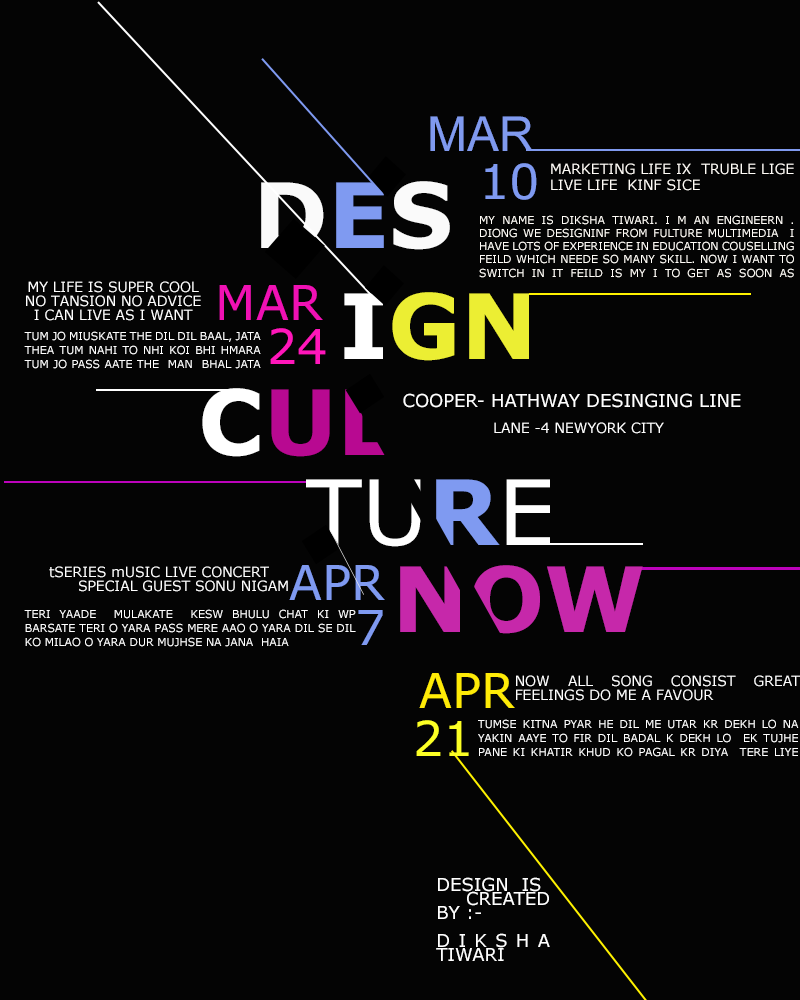
<style>
.page{position:relative;width:800px;height:1000px;background:#040404}
.page>*{position:absolute;margin:0}
.t1{font:48px "ArialMT";color:#809aef}
.t2{font:48px "Verdana";color:#7f9af1}
.t3{font:14px "Verdana";color:#fffcf7}
.t4{font:90px "Verdana-Bold";color:#fafafa}
.t5{font:90px "Verdana-Bold";color:#7f9af1}
.t6{font:11px "Verdana";color:#fffcf7}
.t7{font:14px/14px "Verdana";letter-spacing:-0.005em;color:#ffffff}
.t8{font:48px "Verdana";color:#f011b4}
.t9{font:90px "Verdana-Bold";color:#ecee33}
.t10{font:90px "Verdana-Bold";color:#ffffff}
.t11{font:48px "Verdana";color:#ff16ba}
.t12{font:11px/14px "Verdana";letter-spacing:-0.005em;color:#ffffff}
.t13{font:90px "Verdana-Bold";color:#b80991}
.t14{font:18px "Verdana";letter-spacing:-0.005em;color:#ffffff}
.t15{font:14px "Verdana";letter-spacing:-0.005em;color:#ffffff}
.t16{font:90px "Verdana";color:#ffffff}
.t17{font:90px "Verdana-Bold";color:#c628aa}
.t18{font:48px "Verdana";color:#ffeb07}
.t19{font:14px/14px "Verdana";color:#ffffff}
.t20{font:48px "Verdana";color:#fcff25}
.t21{font:11px/14px "Verdana";color:#ffffff}
.t22{font:18px/14px "Verdana";color:#ffffff}
</style>
<div class="page">
<p class="t1" style="left:430px;top:116px;width:103px;height:35px">MAR</p>
<p class="t2" style="left:485px;top:163px;width:52px;height:37px">10</p>
<p class="t3" style="left:551px;top:163px;width:243px;height:28px;text-align:justify">MARKETING LIFE IX  TRUBLE LIGE<br>LIVE LIFE  KINF SICE</p>
<p class="t4" style="left:261px;top:181px;width:189px;height:69px">D<span class="t5">E</span>S</p>
<p class="t6" style="left:479px;top:215px;width:315px;height:63px;text-align:justify">MY NAME IS DIKSHA TIWARI. I M AN ENGINEERN . DIONG WE DESIGNINF FROM FULTURE MULTIMEDIA  I HAVE LOTS OF EXPERIENCE IN EDUCATION COUSELLING FEILD WHICH NEEDE SO MANY SKILL. NOW I WANT TO SWITCH IN IT FEILD IS MY I TO GET AS SOON AS POSSIBLE</p>
<p class="t7" style="left:26px;top:281px;width:175px;height:40px;text-align:justify">MY LIFE IS SUPER COOL <br>NO TANSION NO ADVICE<br>I CAN LIVE AS I WANT</p>
<p class="t8" style="left:219px;top:285px;width:104px;height:35px">MAR</p>
<p class="t9" style="left:344px;top:292px;width:185px;height:69px"><span class="t10">I</span>GN</p>
<p class="t11" style="left:270px;top:328px;width:56px;height:36px">24</p>
<p class="t12" style="left:24px;top:331px;width:237px;height:38px;text-align:justify">TUM JO MIUSKATE THE DIL DIL BAAL, JATA THEA TUM NAHI TO NHI KOI BHI HMARA TUM JO PASS AATE THE  MAN  BHAL JATA THE TUM NAHI TO NAI KKOI</p>
<p class="t13" style="left:202px;top:388px;width:191px;height:69px"><span class="t10">C</span>UL</p>
<p class="t14" style="left:403px;top:393px;width:338px;height:15px">COOPER- HATHWAY DESINGING LINE</p>
<p class="t15" style="left:494px;top:422px;width:170px;height:12px">LANE -4 NEWYORK CITY</p>
<p class="t16" style="left:306px;top:479px;width:244px;height:68px">TU<span class="t5">R</span>E</p>
<p class="t7" style="left:49px;top:566px;width:239px;height:26px;text-align:justify">tSERIES mUSIC LIVE CONCERT<br>      SPECIAL GUEST SONU NIGAM</p>
<p class="t2" style="left:289px;top:565px;width:96px;height:35px">APR</p>
<p class="t17" style="left:400px;top:565px;width:243px;height:69px">NOW</p>
<p class="t12" style="left:24px;top:609px;width:332px;height:38px;text-align:justify">TERI YAADE  MULAKATE  KESW BHULU CHAT KI WP BARSATE TERI O YARA PASS MERE AAO O YARA DIL SE DIL KO MILAO O YARA DUR MUJHSE NA JANA  HAIA</p>
<p class="t2" style="left:358px;top:610px;width:25px;height:35px">7</p>
<p class="t18" style="left:419px;top:673px;width:96px;height:35px">APR</p>
<p class="t7" style="left:516px;top:675px;width:284px;height:26px;text-align:justify">NOW ALL SONG CONSIST GREAT FEELINGS <span class="t19">DO ME A FAVOUR</span></p>
<p class="t20" style="left:416px;top:720px;width:53px;height:36px">21</p>
<p class="t21" style="left:478px;top:719px;width:321px;height:38px;text-align:justify">TUMSE KITNA PYAR HE DIL ME UTAR KR DEKH LO NA YAKIN AAYE TO FIR DIL BADAL K DEKH LO  EK TUJHE PANE KI KHATIR KHUD KO PAGAL KR DIYA  TERE LIYE TUMSE</p>
<p class="t22" style="left:436px;top:877px;width:114px;height:84px;text-align:justify">DESIGN  IS <br>  CREATED BY :-<br><br>DIKSHA TIWARI</p>
</div>
